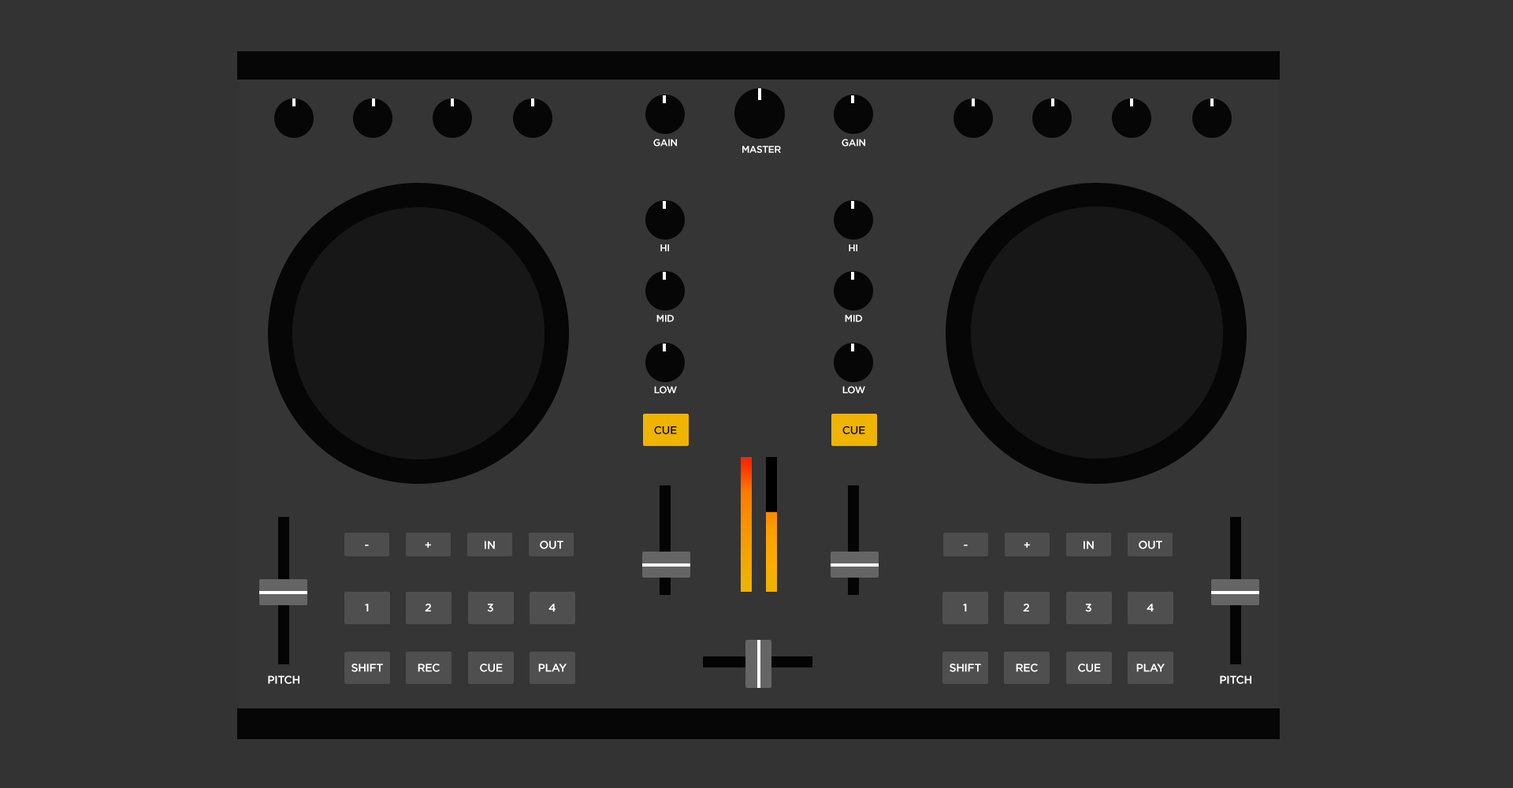
<style>
.page{position:relative;width:1513px;height:788px;background:#333333}
.page>*{position:absolute;margin:0}
.t1{font:9.5px "Gotham-Medium";letter-spacing:-0.025em;color:#ffffff;text-transform:uppercase}
.t2{font:11px "Gotham-Medium";letter-spacing:-0.025em;color:#000000;text-transform:uppercase}
.t3{font:11px "Gotham-Medium";letter-spacing:-0.025em;text-transform:uppercase}
.t4{font:11px "Gotham-Medium";letter-spacing:-0.025em;color:#ffffff;text-transform:uppercase}
</style>
<div class="page">
<p class="t1" style="left:653px;top:139px;width:24px;height:8px">gain</p>
<p class="t1" style="left:742px;top:146px;width:39px;height:7px">Master</p>
<p class="t1" style="left:842px;top:139px;width:23px;height:8px">gain</p>
<p class="t1" style="left:660px;top:244px;width:9px;height:7px">HI</p>
<p class="t1" style="left:849px;top:244px;width:8px;height:7px">HI</p>
<p class="t1" style="left:656px;top:314px;width:18px;height:8px">MID</p>
<p class="t1" style="left:845px;top:314px;width:17px;height:8px">MID</p>
<p class="t1" style="left:654px;top:386px;width:23px;height:8px">LOw</p>
<p class="t1" style="left:842px;top:386px;width:23px;height:8px">LOw</p>
<p class="t2" style="left:654px;top:426px;width:23px;height:8px">CUE</p>
<p class="t2" style="left:842px;top:426px;width:23px;height:8px">CUE</p>
<p class="t3" style="left:365px;top:545px;width:4px;height:1px">-</p>
<p class="t4" style="left:425px;top:542px;width:6px;height:6px">+</p>
<p class="t4" style="left:485px;top:541px;width:10px;height:8px">in</p>
<p class="t4" style="left:540px;top:541px;width:23px;height:8px">out</p>
<p class="t3" style="left:964px;top:545px;width:4px;height:1px">-</p>
<p class="t4" style="left:1024px;top:542px;width:6px;height:6px">+</p>
<p class="t4" style="left:1084px;top:541px;width:10px;height:8px">in</p>
<p class="t4" style="left:1139px;top:541px;width:23px;height:8px">out</p>
<p class="t4" style="left:365px;top:604px;width:4px;height:8px">1</p>
<p class="t4" style="left:425px;top:604px;width:6px;height:8px">2</p>
<p class="t4" style="left:487px;top:604px;width:6px;height:8px">3</p>
<p class="t4" style="left:548px;top:604px;width:8px;height:8px">4</p>
<p class="t4" style="left:963px;top:604px;width:4px;height:8px">1</p>
<p class="t4" style="left:1023px;top:604px;width:6px;height:8px">2</p>
<p class="t4" style="left:1085px;top:604px;width:6px;height:8px">3</p>
<p class="t4" style="left:1147px;top:604px;width:7px;height:8px">4</p>
<p class="t4" style="left:351px;top:664px;width:32px;height:8px">SHIFT</p>
<p class="t4" style="left:418px;top:664px;width:22px;height:8px">REC</p>
<p class="t4" style="left:480px;top:664px;width:23px;height:8px">CUE</p>
<p class="t4" style="left:538px;top:664px;width:29px;height:8px">Play</p>
<p class="t4" style="left:950px;top:664px;width:31px;height:8px">SHIFT</p>
<p class="t4" style="left:1016px;top:664px;width:22px;height:8px">REC</p>
<p class="t4" style="left:1078px;top:664px;width:23px;height:8px">CUE</p>
<p class="t4" style="left:1136px;top:664px;width:29px;height:8px">Play</p>
<p class="t4" style="left:268px;top:675px;width:31px;height:9px">Pitch</p>
<p class="t4" style="left:1220px;top:675px;width:31px;height:9px">Pitch</p>
</div>
